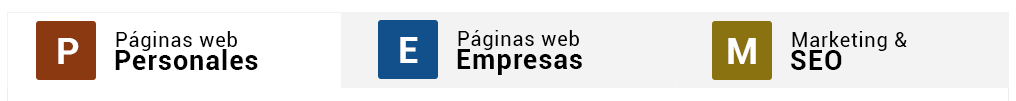
<style>
.page{position:relative;width:1016px;height:101px;background:#ffffff}
.page>*{position:absolute;margin:0}
.t1{font:20px "Roboto-Regular";letter-spacing:0.04em;color:#000000}
.t2{font:37px "Roboto-Bold";letter-spacing:0.04em;color:#ffffff}
.t3{font:27px "Roboto-Bold";letter-spacing:0.04em;color:#000000}
</style>
<div class="page">
<p class="t1" style="left:458px;top:30px;width:121px;height:20px">Páginas web</p>
<p class="t2" style="left:58px;top:38px;width:21px;height:26px">P</p>
<p class="t1" style="left:116px;top:31px;width:121px;height:20px">Páginas web</p>
<p class="t2" style="left:400px;top:37px;width:18px;height:26px">E</p>
<p class="t2" style="left:728px;top:38px;width:28px;height:26px">M</p>
<p class="t1" style="left:792px;top:31px;width:115px;height:20px">Marketing &amp;</p>
<p class="t3" style="left:115px;top:49px;width:143px;height:21px">Personales</p>
<p class="t3" style="left:457px;top:49px;width:125px;height:26px">Empresas</p>
<p class="t3" style="left:791px;top:50px;width:51px;height:20px">SEO</p>
</div>
